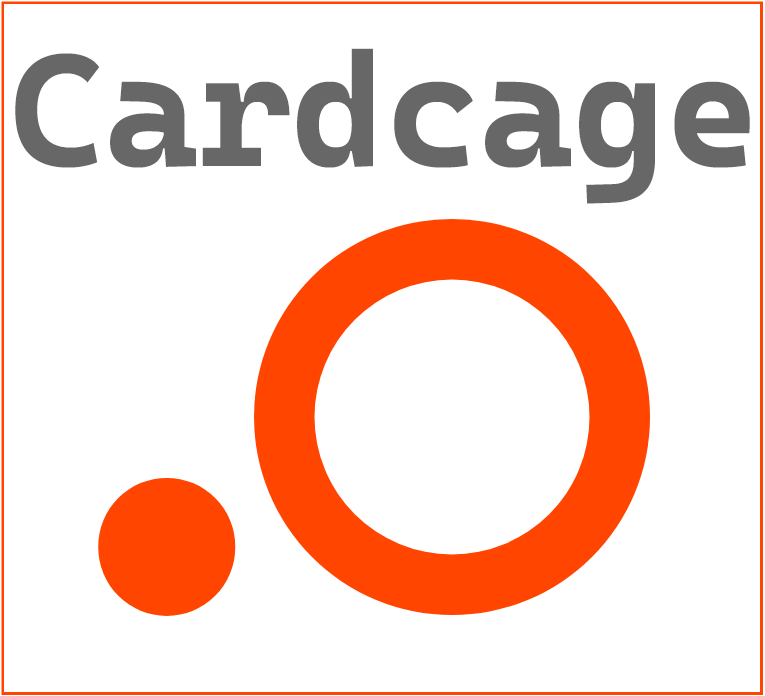
<style>
.page{position:relative;width:765px;height:696px;background:#ffffff}
.page>*{position:absolute;margin:0}
.t1{font:160px "CascadiaCodeRoman-Bold";color:#676767}
</style>
<div class="page">
<p class="t1" style="left:15px;top:48px;width:735px;height:156px">Cardcage</p>
</div>
